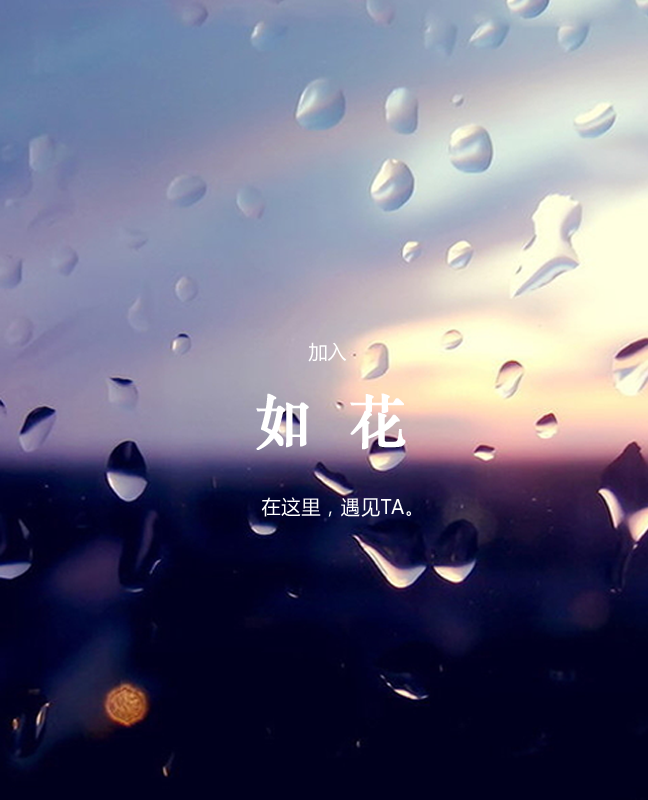
<style>
.page{position:relative;width:648px;height:800px}
.page>*{position:absolute;margin:0}
.t1{font:19.7px "MicrosoftYaHei";color:#ffffff;scale:0.96 1}
.t2{font:59.1px "STZhongsong";letter-spacing:0.76em;color:#ffffff;font-weight:bold;scale:0.96 1}
.t3{font:19.7px "MicrosoftYaHei";letter-spacing:0.06em;color:#ffffff;scale:0.96 1}
</style>
<div class="page">
<p class="t1" style="left:308px;top:342px;width:39px;height:20px">加入</p>
<p class="t2" style="left:256px;top:393px;width:150px;height:57px">如花</p>
<p class="t3" style="left:261px;top:497px;width:150px;height:20px">在这里，遇见TA。</p>
</div>
